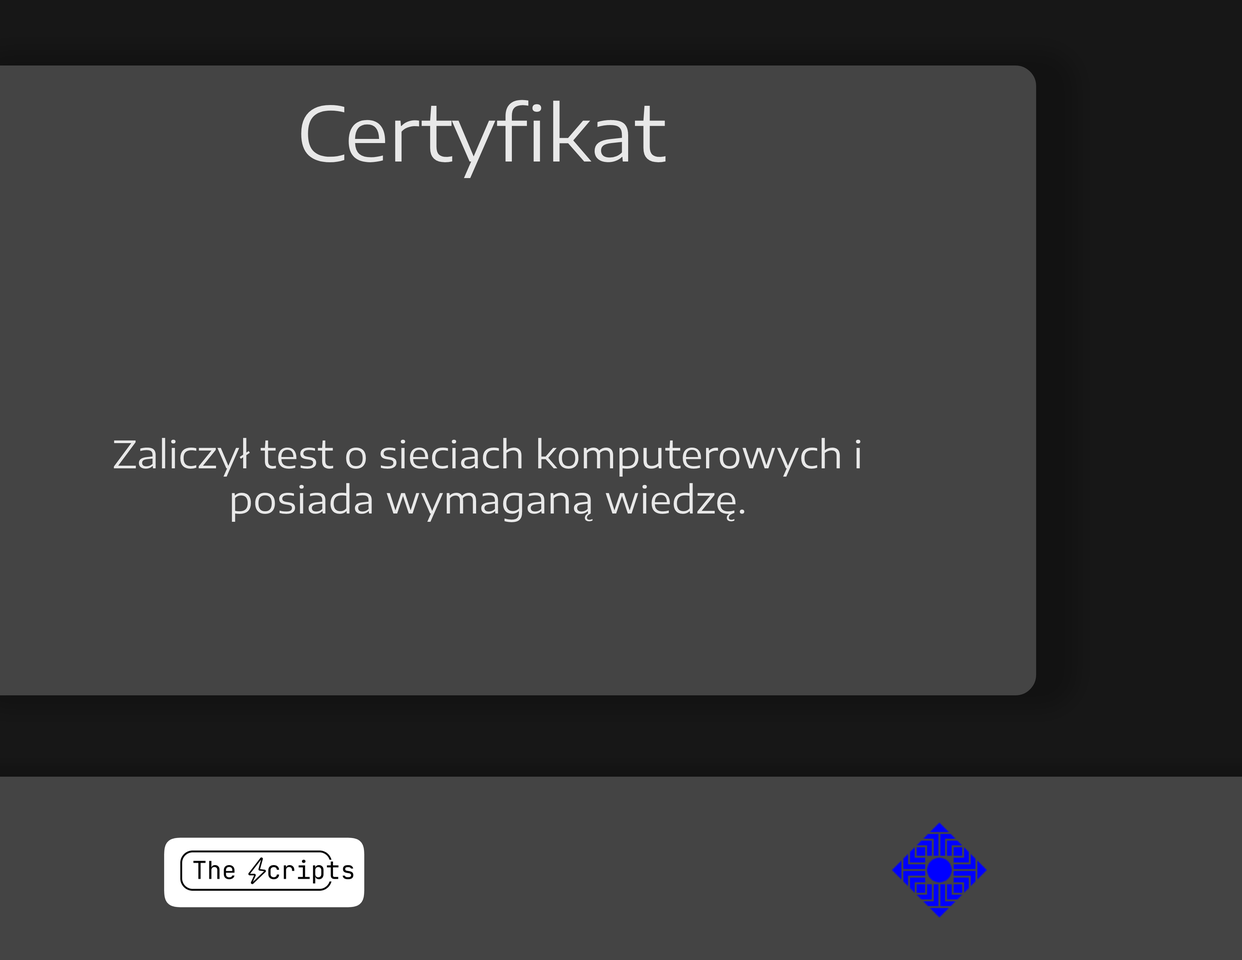
<style>
.page{position:relative;width:1242px;height:960px;background:#444444}
.page>*{position:absolute;margin:0}
.t1{font:75.3px "EncodeSansExpanded-Regular";color:#e8e8e8}
.t2{font:37.6px "EncodeSansExpanded-Regular";color:#e8e8e8}
</style>
<div class="page">
<p class="t1" style="left:301px;top:100px;width:365px;height:78px">Certyfikat</p>
<p class="t2" style="left:114px;top:438px;width:747px;height:84px;text-align:center">Zaliczył test o sieciach komputerowych i<br>posiada wymaganą wiedzę.</p>
</div>
